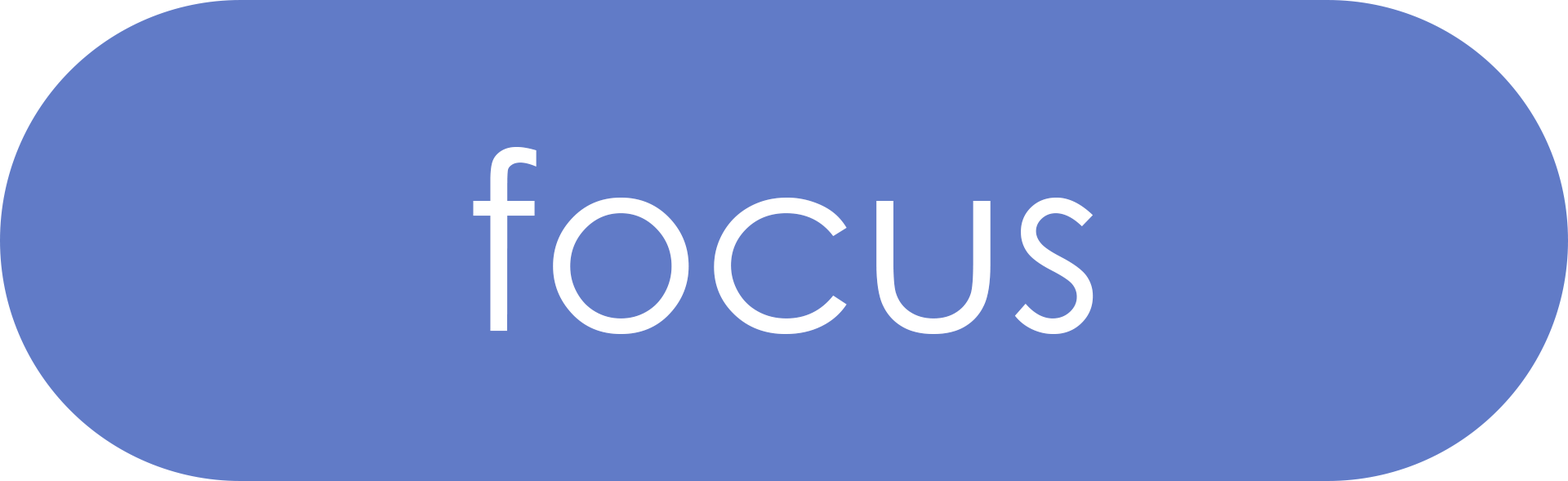
<style>
.page{position:relative;width:1568px;height:481px;background:#617bc7}
.page>*{position:absolute;margin:0}
.t1{font:245px "CenturyGothic";color:#ffffff}
</style>
<div class="page">
<p class="t1" style="left:473px;top:147px;width:621px;height:187px">focus</p>
</div>
